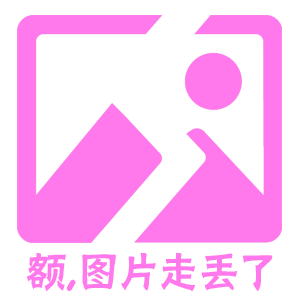
<style>
.page{position:relative;width:300px;height:300px;background:#ffffff}
.page>*{position:absolute;margin:0}
.t1{font:40px "FZYHJW--GB1-0";color:#ff79ec}
</style>
<div class="page">
<p class="t1" style="left:27px;top:252px;width:246px;height:40px">额,图片走丢了</p>
</div>
